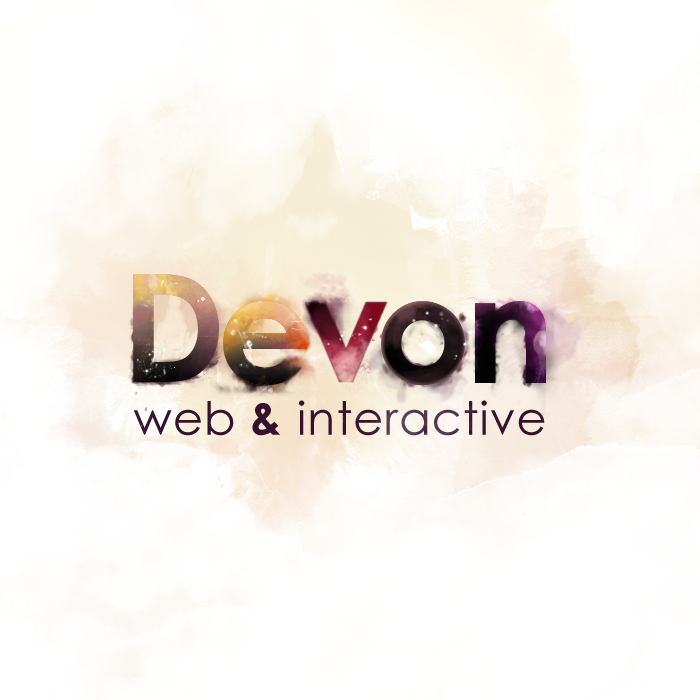
<style>
.page{position:relative;width:700px;height:700px;background:#ffffff}
.page>*{position:absolute;margin:0}
.t1{font:46px "CenturyGothic";letter-spacing:0.025em;color:#34102c}
.t2{font:46px "CenturyGothic-Bold";letter-spacing:0.025em;color:#34102c}
</style>
<div class="page">
<p class="t1" style="left:133px;top:400px;width:412px;height:36px">web <span class="t2">&amp; </span>interactive</p>
</div>
